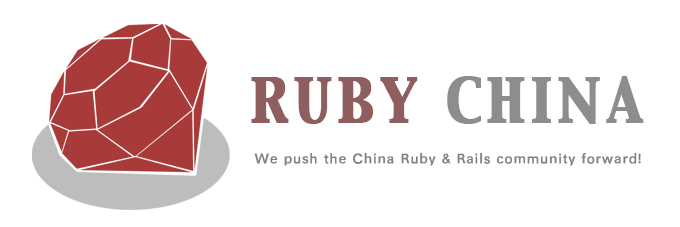
<style>
.page{position:relative;width:680px;height:227px;background:#ffffff}
.page>*{position:absolute;margin:0}
.t1{font:54px "CapitalsRegular";letter-spacing:0.075em;color:#8e8d8d;font-weight:bold}
.t2{font:54px "CapitalsRegular";letter-spacing:0.075em;color:#8f5e5e;font-weight:bold}
.t3{font:14px "SIL-Hei-Med-Jian";letter-spacing:0.025em;color:#828282;font-weight:bold}
</style>
<div class="page">
<p class="t1" style="left:251px;top:76px;width:393px;height:48px"><span class="t2">RUBY </span>CHINA</p>
<p class="t3" style="left:254px;top:152px;width:387px;height:14px">We push the China Ruby &amp; Rails community forward!</p>
</div>
